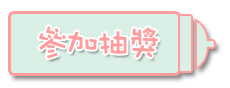
<style>
.page{position:relative;width:230px;height:88px;background:#daefe6}
.page>*{position:absolute;margin:0}
.t1{font:36px "DFWaWa-W7-HKP-BF";letter-spacing:-0.1em;color:#ff9d9d;scale:0.95 1}
</style>
<div class="page">
<p class="t1" style="left:39px;top:26px;width:119px;height:33px">參加抽獎</p>
</div>
